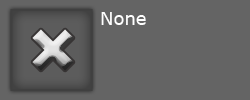
<style>
.page{position:relative;width:250px;height:100px;background:#646464}
.page>*{position:absolute;margin:0}
.t1{font:18px "Verdana";color:#ffffff}
</style>
<div class="page">
<p class="t1" style="left:101px;top:12px;width:45px;height:13px">None</p>
</div>
